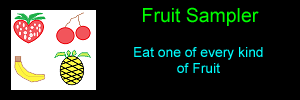
<style>
.page{position:relative;width:300px;height:100px;background:#000000}
.page>*{position:absolute;margin:0}
.t1{font:19.4px "ArialMT";color:#00ff00}
.t2{font:13.9px "ArialMT";color:#00ffff}
</style>
<div class="page">
<p class="t1" style="left:143px;top:7px;width:116px;height:19px">Fruit Sampler</p>
<p class="t2" style="left:134px;top:47px;width:129px;height:26px;text-align:center">Eat one of every kind<br>of Fruit</p>
</div>
